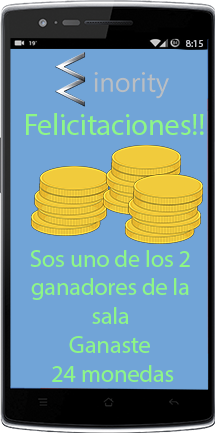
<style>
.page{position:relative;width:215px;height:433px;background:#71a4d7}
.page>*{position:absolute;margin:0}
.t1{font:10px "MyriadPro-Regular";color:#c4c5cb}
.t2{font:30px "MyriadPro-Regular";color:#8ef686}
.t3{font:24px "MyriadPro-Regular";color:#8ef686}
</style>
<div class="page">
<p class="t1" style="left:186px;top:40px;width:17px;height:7px">8:15</p>
<p class="t2" style="left:26px;top:113px;width:178px;height:22px">Felicitaciones!!</p>
<p class="t3" style="left:30px;top:250px;width:160px;height:74px;text-align:center">Sos uno de los 2<br> ganadores de la <br>sala</p>
<p class="t3" style="left:52px;top:336px;width:122px;height:46px;text-align:center">Ganaste <br>24 monedas</p>
</div>
